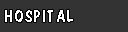
<style>
.page{position:relative;width:128px;height:32px;background:#333333}
.page>*{position:absolute;margin:0}
.t1{font:17.2px "DomCasualBT-Regular";letter-spacing:0.05em;color:#ffffff;scale:1.05 1}
</style>
<div class="page">
<p class="t1" style="left:5px;top:10px;width:68px;height:12px">HOSPITAL</p>
</div>
